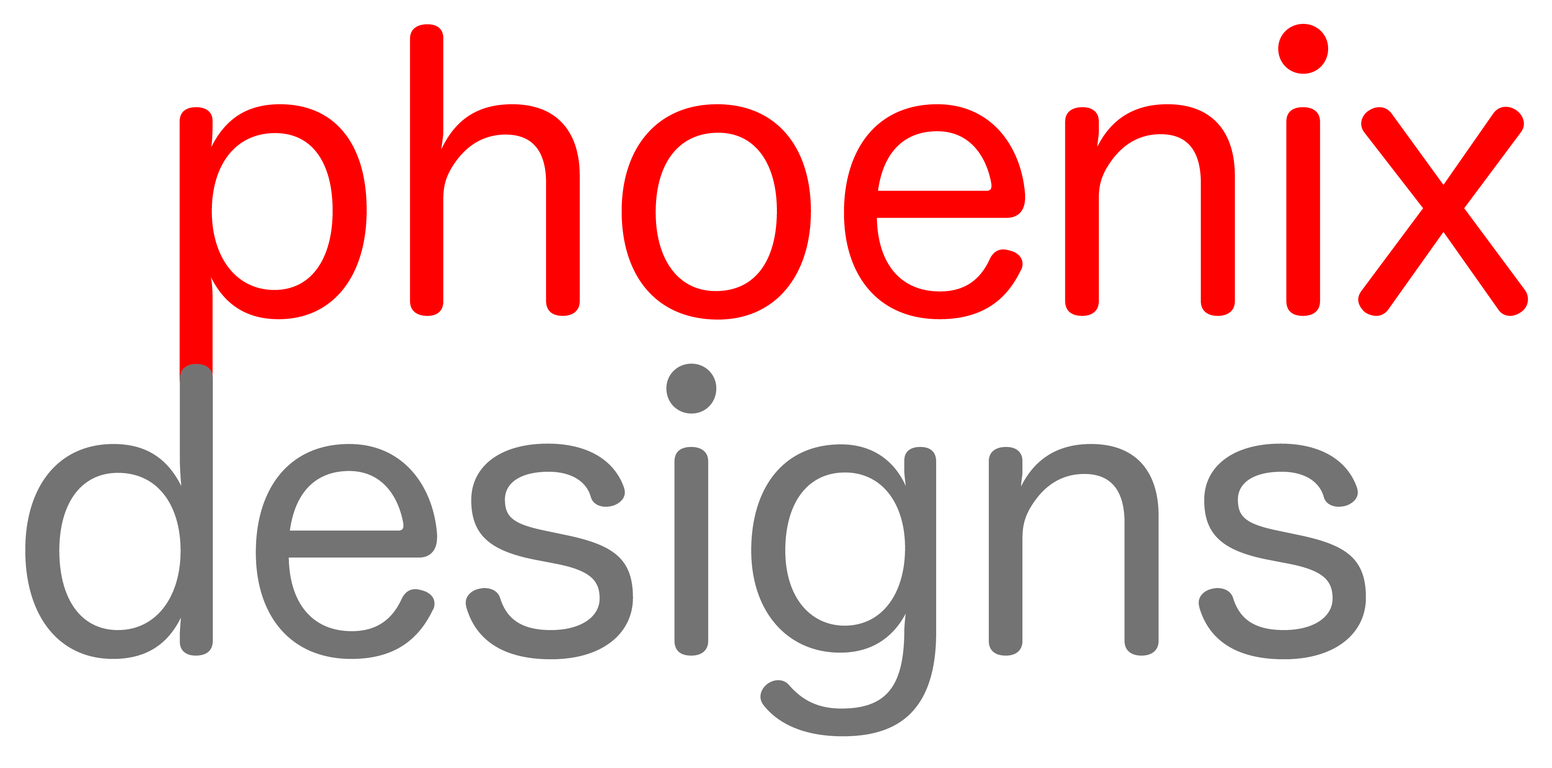
<style>
.page{position:relative;width:1552px;height:768px;background:#ffffff}
.page>*{position:absolute;margin:0}
.t1{font:368.7px "HiraMaruProN-W4";color:#ff0000}
.t2{font:368.6px "HiraMaruPro-W4";color:#737373}
</style>
<div class="page">
<p class="t1" style="left:180px;top:24px;width:1348px;height:370px">phoenix</p>
<p class="t2" style="left:25px;top:364px;width:1341px;height:373px">designs</p>
</div>
